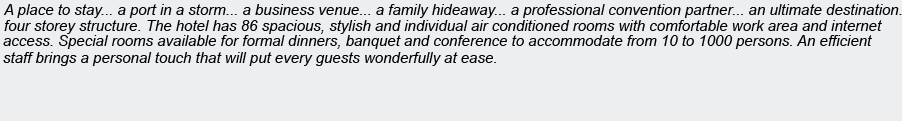
<style>
.page{position:relative;width:902px;height:121px;background:#edeef0}
.page>*{position:absolute;margin:0}
.t1{font:15px "Arial-ItalicMT";color:#000000}
</style>
<div class="page">
<p class="t1" style="left:4px;top:20px;width:878px;height:14px">four storey structure. The hotel has 86 spacious, stylish and individual air conditioned rooms with comfortable work area and internet</p>
<p class="t1" style="left:3px;top:35px;width:869px;height:14px">access. Special rooms available for formal dinners, banquet and conference to accommodate from 10 to 1000 persons. An efficient</p>
<p class="t1" style="left:3px;top:52px;width:493px;height:14px">staff brings a personal touch that will put every guests wonderfully at ease.</p>
</div>
